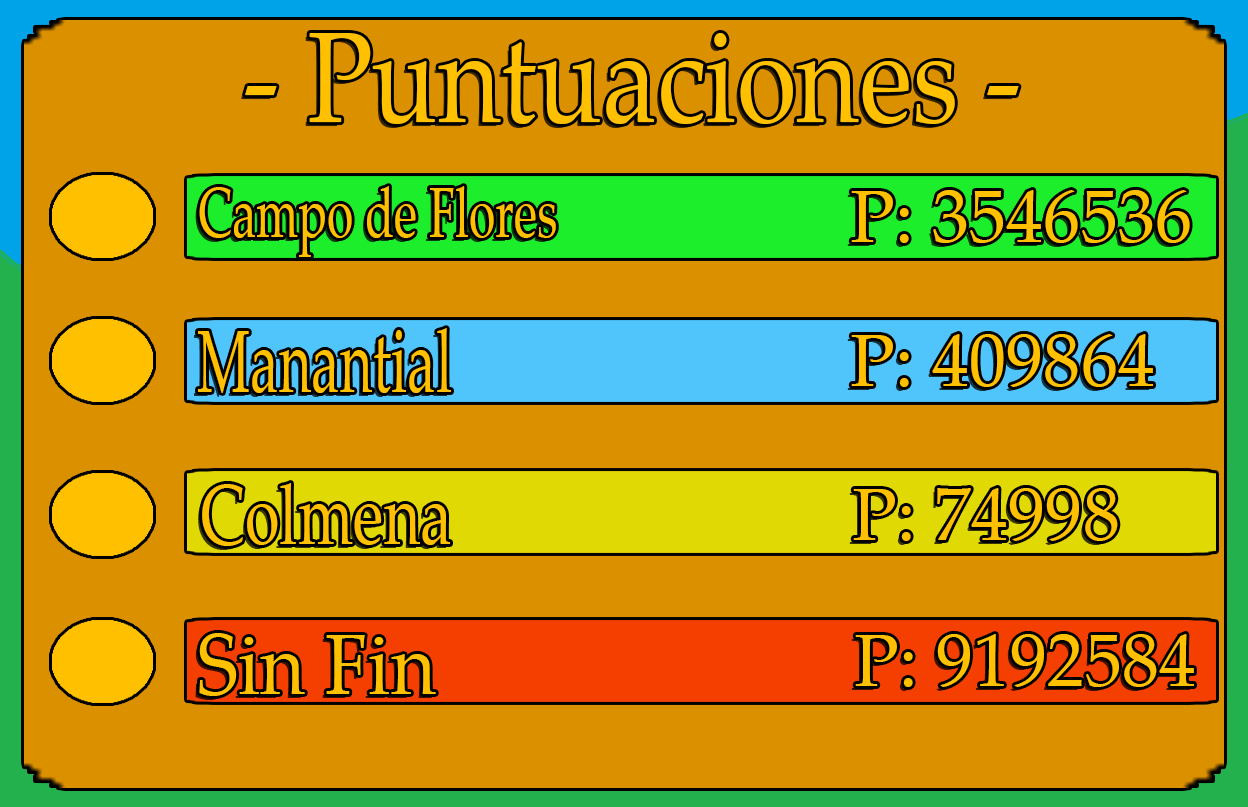
<style>
.page{position:relative;width:1248px;height:807px;background:#db9000}
.page>*{position:absolute;margin:0}
.t1{font:128.8px "PalatinoLinotype-Roman";color:#ffc000;scale:0.84 1}
.t2{font:71.3px "PalatinoLinotype-Roman";color:#ffc000;scale:0.67 1}
.t3{font:74.8px "PalatinoLinotype-Roman";color:#ffc000}
.t4{font:88.7px "PalatinoLinotype-Roman";color:#ffc000;scale:0.64 1}
.t5{font:85.3px "PalatinoLinotype-Roman";color:#ffc000;scale:0.74 1}
.t6{font:86.1px "PalatinoLinotype-Roman";color:#ffc000;scale:0.9 1}
</style>
<div class="page">
<p class="t1" style="left:245px;top:33px;width:774px;height:91px">- Puntuaciones -</p>
<p class="t2" style="left:199px;top:186px;width:357px;height:71px">Campo de Flores</p>
<p class="t3" style="left:851px;top:190px;width:339px;height:53px">P: 3546536</p>
<p class="t4" style="left:198px;top:328px;width:253px;height:65px">Manantial</p>
<p class="t3" style="left:851px;top:334px;width:302px;height:53px">P: 409864</p>
<p class="t5" style="left:202px;top:483px;width:248px;height:63px">Colmena</p>
<p class="t3" style="left:853px;top:488px;width:265px;height:53px">P: 74998</p>
<p class="t6" style="left:199px;top:633px;width:237px;height:63px">Sin Fin</p>
<p class="t3" style="left:855px;top:634px;width:339px;height:53px">P: 9192584</p>
</div>
